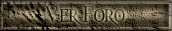
<style>
.page{position:relative;width:172px;height:31px}
.page>*{position:absolute;margin:0}
.t1{font:20.8px "Morpheus"}
</style>
<div class="page">
<p class="t1" style="left:44px;top:6px;width:81px;height:19px">Ver Foro</p>
</div>
